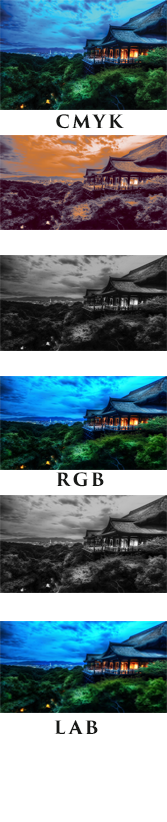
<style>
.page{position:relative;width:167px;height:822px;background:#ffffff}
.page>*{position:absolute;margin:0}
.t1{font:18px "TrajanPro3-Bold";letter-spacing:0.12em;color:#181917}
</style>
<div class="page">
<p class="t1" style="left:56px;top:114px;width:68px;height:15px">CMYK</p>
<p class="t1" style="left:56px;top:472px;width:48px;height:15px">RGB</p>
<p class="t1" style="left:54px;top:720px;width:44px;height:14px">LAB</p>
</div>
